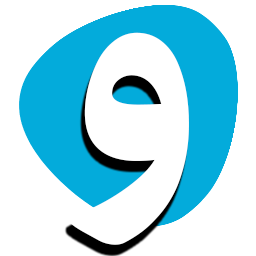
<style>
.page{position:relative;width:256px;height:256px;background:#ffffff}
.page>*{position:absolute;margin:0}
.t1{font:318.4px "Sahel-Bold";color:#ffffff}
</style>
<div class="page">
<p class="t1" style="left:69px;top:32px;width:120px;height:213px">و</p>
</div>
